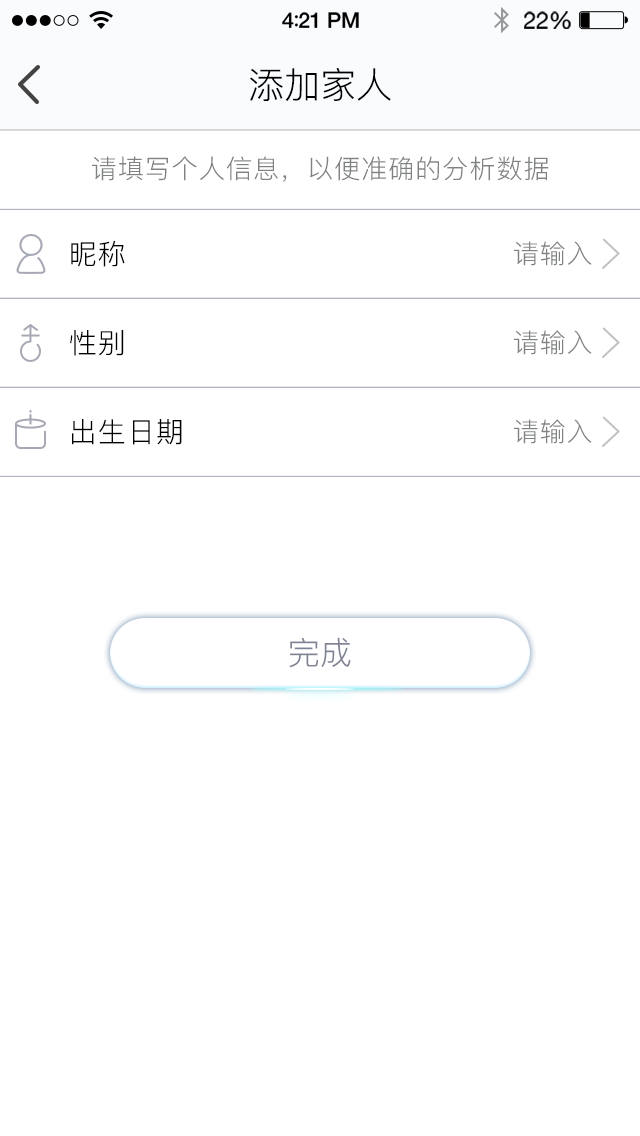
<style>
.page{position:relative;width:640px;height:1136px;background:#ffffff}
.page>*{position:absolute;margin:0}
.t1{font:36px "PingFang-SC-Regular";color:#000000}
.t2{font:26px "PingFang-SC-Regular";letter-spacing:0.04em;color:#808282}
.t3{font:28px "PingFang-SC-Regular";letter-spacing:0.04em;color:#000000}
.t4{font:32px "PingFang-SC-Regular";color:#7f8393}
</style>
<div class="page">
<p class="t1" style="left:250px;top:68px;width:141px;height:33px">添加家人</p>
<p class="t2" style="left:92px;top:156px;width:457px;height:26px">请填写个人信息，以便准确的分析数据</p>
<p class="t3" style="left:71px;top:240px;width:54px;height:27px">昵称</p>
<p class="t2" style="left:514px;top:241px;width:78px;height:25px">请输入</p>
<p class="t3" style="left:70px;top:330px;width:54px;height:26px">性别</p>
<p class="t2" style="left:514px;top:330px;width:78px;height:25px">请输入</p>
<p class="t3" style="left:72px;top:419px;width:110px;height:26px">出生日期</p>
<p class="t2" style="left:514px;top:419px;width:78px;height:25px">请输入</p>
<p class="t4" style="left:289px;top:637px;width:62px;height:31px">完成</p>
</div>
